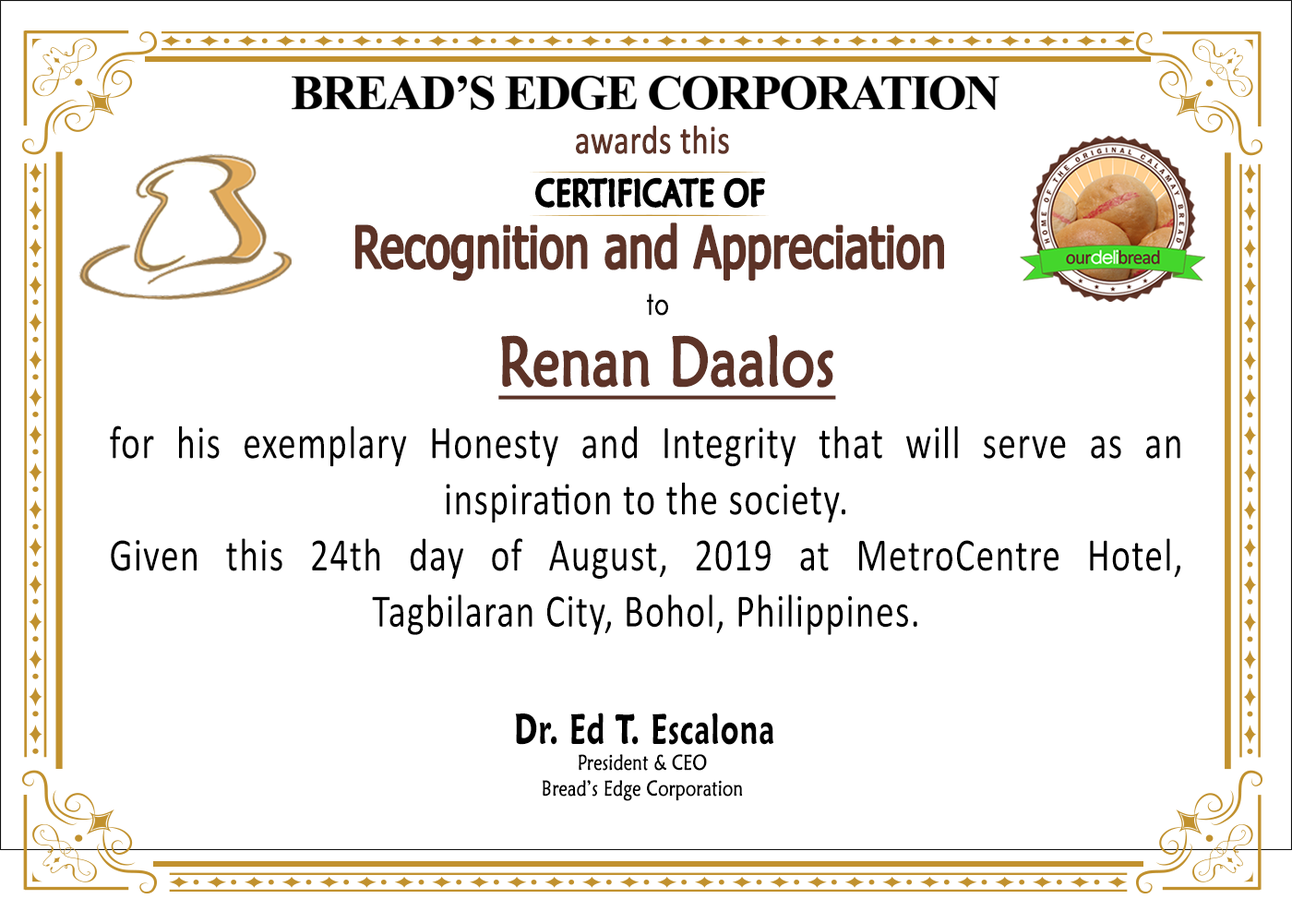
<style>
.page{position:relative;width:1292px;height:923px;background:#ffffff}
.page>*{position:absolute;margin:0}
.t1{font:40.3px "Calibri";color:#5d3327;font-weight:bold;scale:0.79 1}
.t2{font:37.3px "MaiandraGD-Regular";color:#000000;font-weight:bold;scale:0.79 1}
.t3{font:57.4px "Tahoma";color:#5d3327;font-weight:bold;scale:0.76 1}
.t4{font:28px "CenturyGothic";color:#000000;font-weight:bold;scale:0.79 1}
.t5{font:68.8px "MaiandraGD-Regular";color:#5d3327;font-weight:bold;text-decoration:underline;scale:0.78 1}
.t6{font:46.8px "Calibri";letter-spacing:0.03em;color:#000000;scale:0.79 1}
.t7{font:42.3px "MaiandraGD-DemiBold";letter-spacing:0.03em;color:#000000;scale:0.69 1}
.t8{font:21.5px "MaiandraGD-Regular";color:#000000;font-weight:bold;scale:0.79 1}
</style>
<div class="page">
<p class="t1" style="left:576px;top:126px;width:153px;height:28px">awards this</p>
<p class="t2" style="left:535px;top:177px;width:230px;height:32px">CERTIFICATE OF</p>
<p class="t3" style="left:355px;top:222px;width:589px;height:59px">Recognition and Appreciation</p>
<p class="t4" style="left:647px;top:293px;width:21px;height:23px">to</p>
<p class="t5" style="left:498px;top:334px;width:338px;height:66px">Renan Daalos</p>
<p class="t6" style="left:110px;top:425px;width:1070px;height:210px;text-align:justify">for his exemplary Honesty and Integrity that will serve as an inspiration to the society.<br>Given this 24th day of August, 2019 at MetroCentre Hotel, Tagbilaran City, Bohol, Philippines.</p>
<p class="t7" style="left:515px;top:712px;width:259px;height:33px">Dr. Ed T. Escalona</p>
<p class="t8" style="left:543px;top:754px;width:200px;height:47px;text-align:center">President &amp; CEO<br>Bread’s Edge Corporation</p>
</div>
